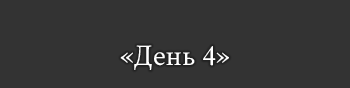
<style>
.page{position:relative;width:350px;height:88px;background:#333333}
.page>*{position:absolute;margin:0}
.t1{font:30px "CrimsonText-Regular";color:#ffffff}
</style>
<div class="page">
<p class="t1" style="left:120px;top:45px;width:109px;height:25px">«День 4»</p>
</div>
